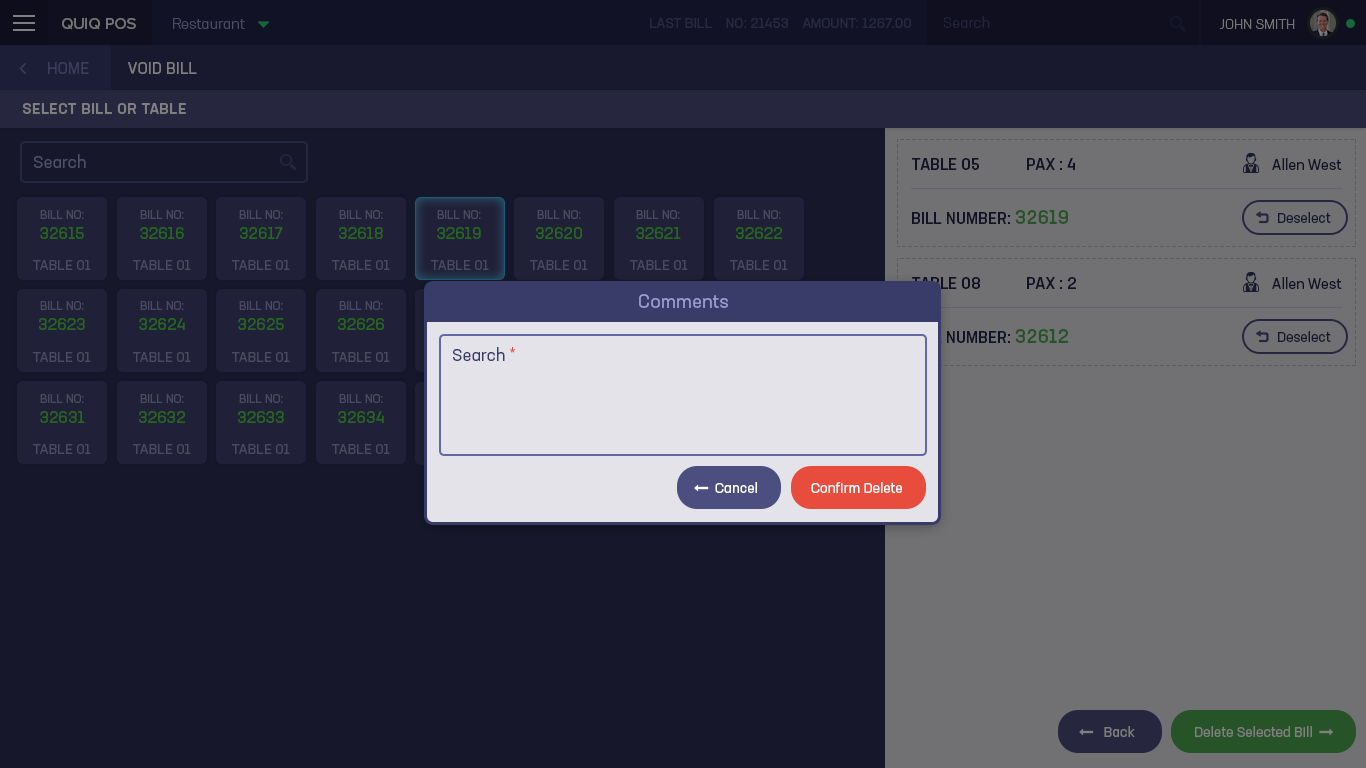
<style>
.page{position:relative;width:1366px;height:768px;background:#16172b}
.page>*{position:absolute;margin:0}
.t1{font:15px "NeusaNextStd-Light";color:#23243a}
.t2{font:16px "ProximaNova-Medium";color:#767676}
.t3{font:15px "NeusaNextStd-Light";color:#4a4b62}
.t4{font:14px "NeusaNextStd-Regular";color:#28293e;text-transform:uppercase}
.t5{font:14px "NeusaNextStd-Light";color:#767676;text-transform:uppercase}
.t6{font:16px "NeusaNextStd-Regular";color:#3b3d5a;text-transform:uppercase}
.t7{font:16px "NeusaNextStd-Regular";color:#7f7f7f;text-transform:uppercase}
.t8{font:15px "NeusaNextStd-Medium";letter-spacing:0.04em;color:#7f7f7f;text-transform:uppercase}
.t9{font:17px "NeusaNextStd-Regular";color:#4e4f68}
.t10{font:16px "NeusaNextStd-Medium";color:#111225;text-transform:uppercase}
.t11{font:15px "NeusaNextStd-Regular";color:#111225}
.t12{font:12px/20px "NeusaNextStd-Regular";text-transform:uppercase}
.t13{font:16px/20px "NeusaNextStd-Regular";text-transform:uppercase}
.t14{font:16px "NeusaNextStd-Medium";text-transform:uppercase}
.t15{font:19px "NeusaNextStd-Medium";text-transform:uppercase}
.t16{font:14px "NeusaNextStd-Regular";color:#16172b}
.t17{font:19px "NeusaNextStd-Regular";color:#9c9fd1}
.t18{font:17px "NeusaNextStd-Regular";color:#393b68}
.t19{font:17px "NeusaNextStd-Regular";color:#e74c3c}
.t20{font:14px "NeusaNextStd-Regular";color:#ffffff}
</style>
<div class="page">
<p class="t1" style="left:943px;top:16px;width:47px;height:12px">Search</p>
<p class="t2" style="left:62px;top:18px;width:74px;height:12px">QUIQ POS</p>
<p class="t3" style="left:173px;top:18px;width:72px;height:11px">Restaurant</p>
<p class="t4" style="left:650px;top:18px;width:261px;height:10px">Last Bill    NO: 21453    Amount: 1267.00</p>
<p class="t5" style="left:1220px;top:19px;width:75px;height:10px">John Smith</p>
<p class="t6" style="left:48px;top:62px;width:41px;height:12px">Home</p>
<p class="t7" style="left:128px;top:62px;width:69px;height:12px">Void Bill</p>
<p class="t8" style="left:22px;top:103px;width:164px;height:11px">Select Bill or Table</p>
<p class="t9" style="left:34px;top:154px;width:52px;height:14px">Search</p>
<p class="t10" style="left:912px;top:158px;width:67px;height:12px">Table 05</p>
<p class="t10" style="left:1027px;top:158px;width:48px;height:12px">PAX : 4</p>
<p class="t11" style="left:1272px;top:158px;width:70px;height:12px">Allen West</p>
<p class="t12" style="left:40px;top:210px;width:44px;height:29px;text-align:center">Bill No:<br><span class="t13">32615</span></p>
<p class="t12" style="left:140px;top:210px;width:44px;height:29px;text-align:center">Bill No:<br><span class="t13">32616</span></p>
<p class="t12" style="left:239px;top:210px;width:44px;height:29px;text-align:center">Bill No:<br><span class="t13">32617</span></p>
<p class="t12" style="left:339px;top:210px;width:44px;height:29px;text-align:center">Bill No:<br><span class="t13">32618</span></p>
<p class="t12" style="left:437px;top:210px;width:44px;height:29px;text-align:center">Bill No:<br><span class="t13">32619</span></p>
<p class="t12" style="left:536px;top:210px;width:46px;height:29px;text-align:center">Bill No:<br><span class="t13">32620</span></p>
<p class="t12" style="left:636px;top:210px;width:45px;height:29px;text-align:center">Bill No:<br><span class="t13">32621</span></p>
<p class="t12" style="left:736px;top:210px;width:46px;height:29px;text-align:center">Bill No:<br><span class="t13">32622</span></p>
<p class="t14" style="left:912px;top:210px;width:156px;height:14px">Bill Number: <span class="t15">32619</span></p>
<p class="t16" style="left:1278px;top:212px;width:53px;height:11px">Deselect</p>
<p class="t10" style="left:912px;top:277px;width:68px;height:12px">Table 08</p>
<p class="t10" style="left:1027px;top:277px;width:49px;height:12px">PAX : 2</p>
<p class="t11" style="left:1272px;top:277px;width:70px;height:12px">Allen West</p>
<p class="t17" style="left:639px;top:294px;width:89px;height:14px">Comments</p>
<p class="t12" style="left:39px;top:301px;width:46px;height:29px;text-align:center">Bill No:<br><span class="t13">32623</span></p>
<p class="t12" style="left:139px;top:301px;width:46px;height:29px;text-align:center">Bill No:<br><span class="t13">32624</span></p>
<p class="t12" style="left:238px;top:301px;width:46px;height:29px;text-align:center">Bill No:<br><span class="t13">32625</span></p>
<p class="t12" style="left:338px;top:301px;width:46px;height:29px;text-align:center">Bill No:<br><span class="t13">32626</span></p>
<p class="t14" style="left:912px;top:329px;width:156px;height:14px">Bill Number: <span class="t15">32612</span></p>
<p class="t16" style="left:1278px;top:331px;width:53px;height:11px">Deselect</p>
<p class="t18" style="left:453px;top:347px;width:62px;height:14px">Search <span class="t19">*</span></p>
<p class="t12" style="left:40px;top:394px;width:45px;height:29px;text-align:center">Bill No:<br><span class="t13">32631</span></p>
<p class="t12" style="left:139px;top:394px;width:46px;height:29px;text-align:center">Bill No:<br><span class="t13">32632</span></p>
<p class="t12" style="left:238px;top:394px;width:46px;height:29px;text-align:center">Bill No:<br><span class="t13">32633</span></p>
<p class="t12" style="left:338px;top:394px;width:46px;height:29px;text-align:center">Bill No:<br><span class="t13">32634</span></p>
<p class="t20" style="left:811px;top:482px;width:91px;height:11px">Confirm Delete</p>
</div>
